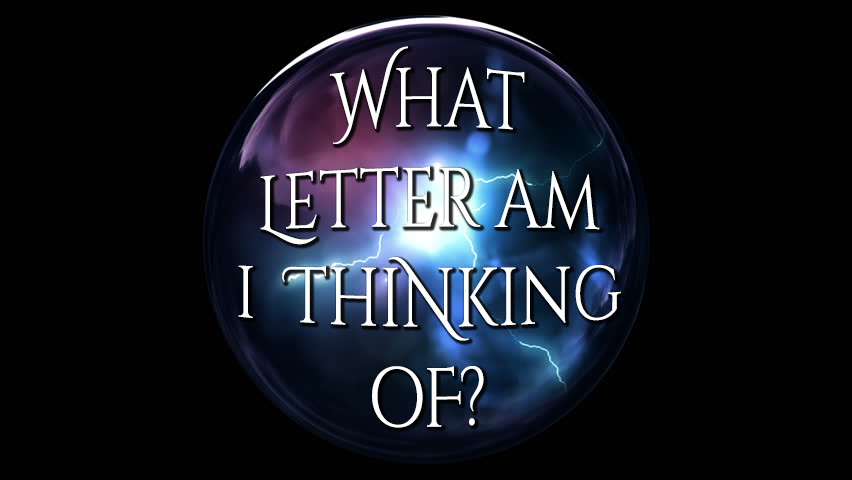
<style>
.page{position:relative;width:852px;height:480px;background:#010101}
.page>*{position:absolute;margin:0}
.t1{font:70.3px "CinzelDecorative-Regular";color:#ffffff;scale:0.91 1}
</style>
<div class="page">
<p class="t1" style="left:238px;top:46px;width:383px;height:382px;text-align:center">What <br>Letter am <br>i  ThiNking oF?</p>
</div>
